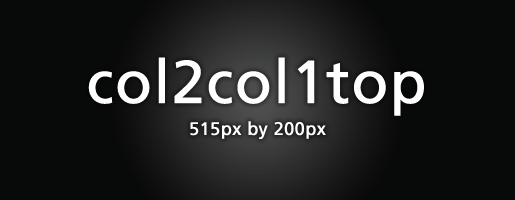
<style>
.page{position:relative;width:515px;height:200px;background:#080909}
.page>*{position:absolute;margin:0}
.t1{font:60px "FrutigerLT-Roman";color:#ffffff;font-weight:bold}
.t2{font:18px "FrutigerLT-Roman";color:#ffffff;font-weight:bold}
</style>
<div class="page">
<p class="t1" style="left:88px;top:57px;width:336px;height:59px">col2col1top</p>
<p class="t2" style="left:190px;top:121px;width:136px;height:18px">515px by 200px</p>
</div>
